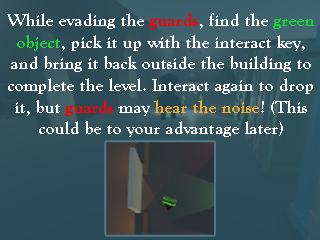
<style>
.page{position:relative;width:320px;height:240px}
.page>*{position:absolute;margin:0}
.t1{font:18px "GoudyOldStyleT-Bold";color:#ffffff}
.t2{font:18px "GoudyOldStyleT-Bold";color:#ff0000}
.t3{font:18px "GoudyOldStyleT-Bold";color:#1cd636}
.t4{font:18px "GoudyOldStyleT-Bold";color:#f1aa2e}
</style>
<div class="page">
<p class="t1" style="left:7px;top:13px;width:307px;height:124px;text-align:center">While evading the <span class="t2">guards</span>, find the <span class="t3">green<br>object</span>, pick it up with the interact key,<br>and bring it back outside the building to<br>complete the level. Interact again to drop<br>it, but <span class="t2">guards</span> may <span class="t4">hear the noise</span>! (This<br>could be to your advantage later)</p>
</div>
